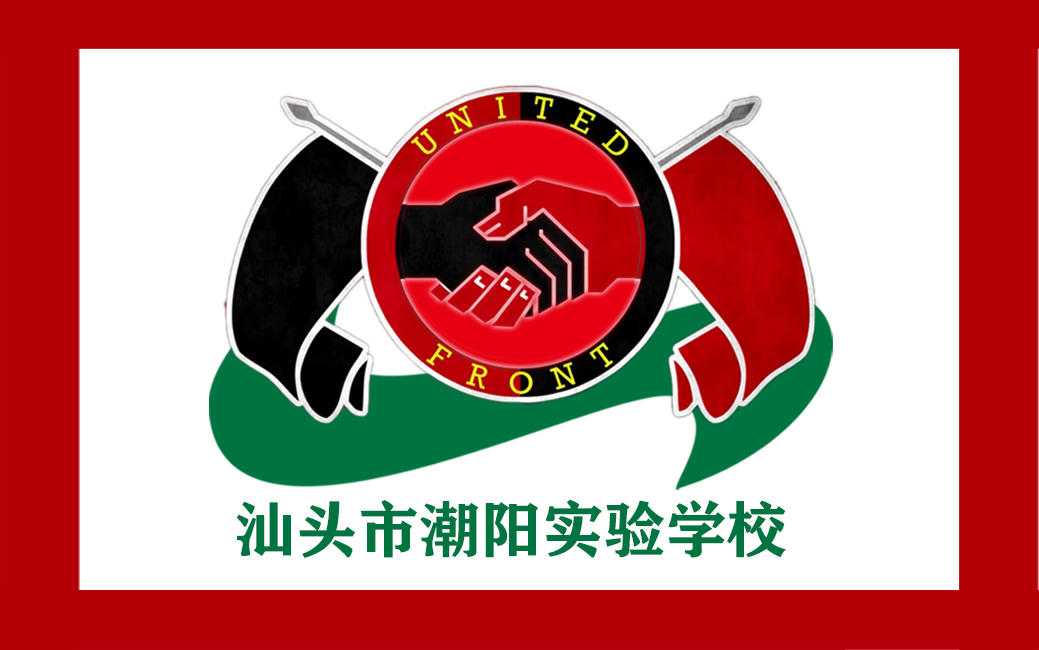
<style>
.page{position:relative;width:1039px;height:650px;background:#ffffff}
.page>*{position:absolute;margin:0}
.t1{font:61.5px "FZCHSJW--GB1-0";color:#007440}
</style>
<div class="page">
<p class="t1" style="left:236px;top:499px;width:550px;height:59px">汕头市潮阳实验学校</p>
</div>
